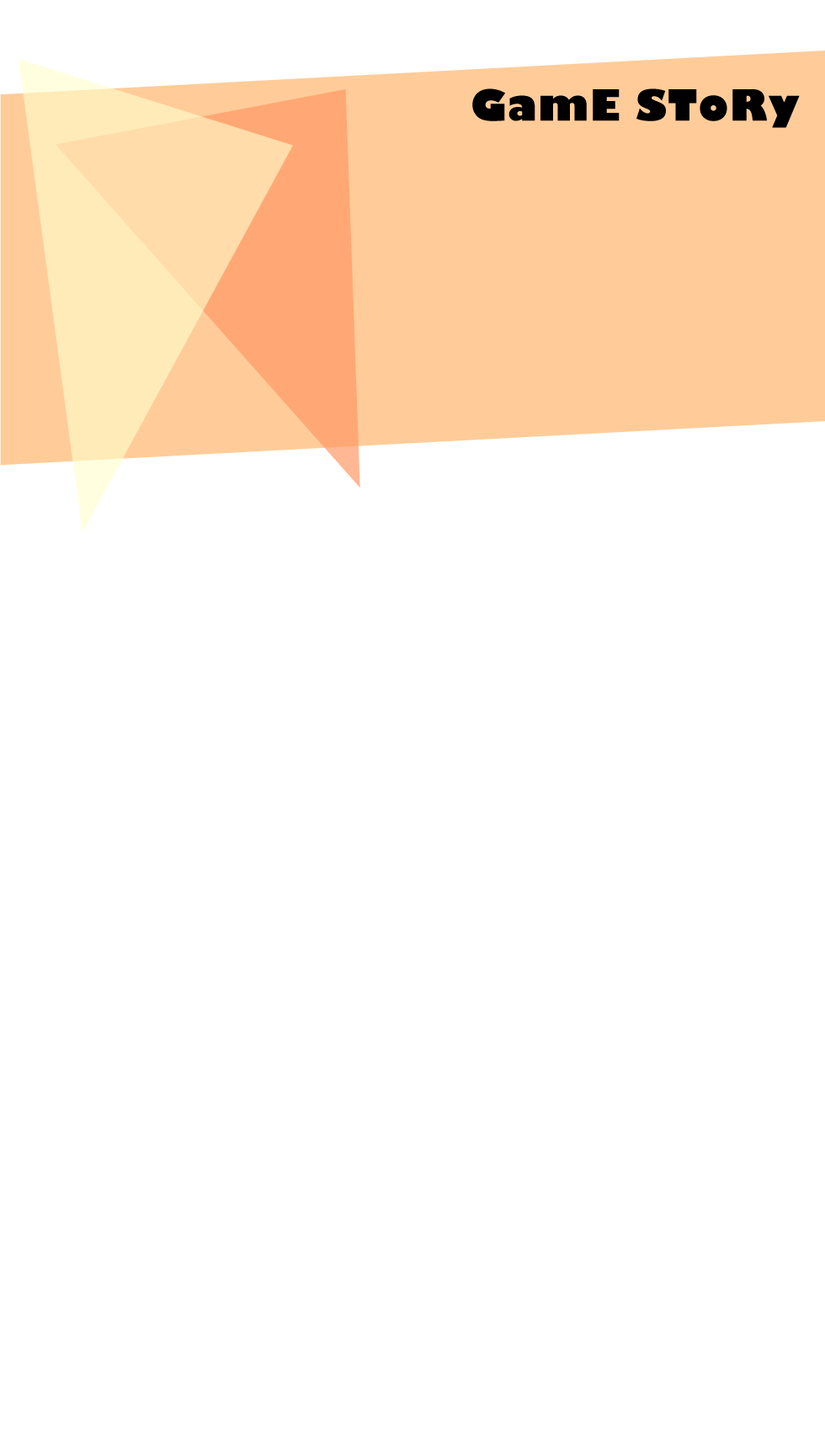
<style>
.page{position:relative;width:825px;height:1445px;background:#ffffff}
.page>*{position:absolute;margin:0}
.t1{font:42.1px "GillSans-UltraBold";letter-spacing:0.025em;color:#000000}
</style>
<div class="page">
<p class="t1" style="left:472px;top:88px;width:328px;height:40px">GamE SToRy</p>
</div>
